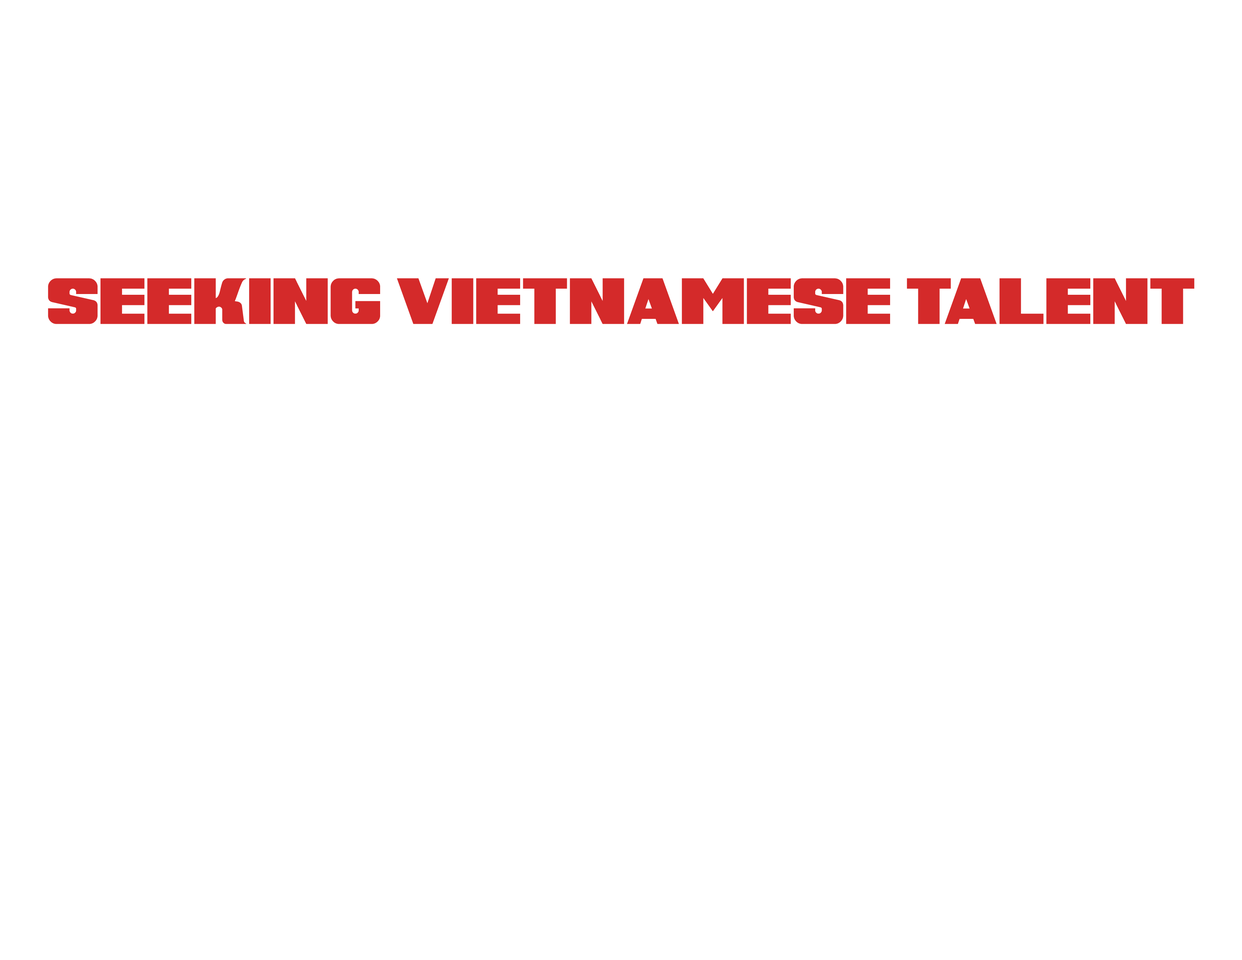
<style>
.page{position:relative;width:1242px;height:960px;background:#ffffff}
.page>*{position:absolute;margin:0}
.t1{font:56.9px "SuperRetroM54";color:#d42a2a}
</style>
<div class="page">
<p class="t1" style="left:48px;top:278px;width:1147px;height:46px">Seeking Vietnamese Talent</p>
</div>
